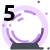
<style>
.page{position:relative;width:50px;height:50px;background:#ffffff}
.page>*{position:absolute;margin:0}
.t1{font:24px "MyriadHebrew-Bold";color:#000000}
</style>
<div class="page">
<p class="t1" style="left:3px;top:5px;width:12px;height:16px">5</p>
</div>
